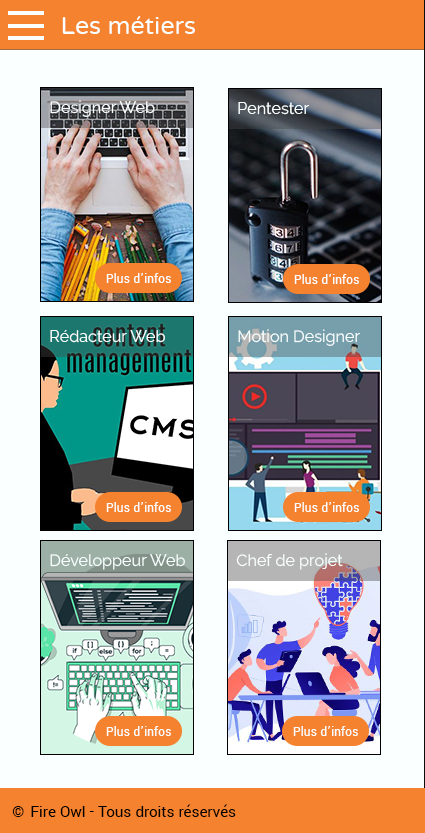
<style>
.page{position:relative;width:425px;height:833px;background:#faffff}
.page>*{position:absolute;margin:0}
.t1{font:25px "VarelaRound-Regular";color:#faffff}
.t2{font:16.2px "Raleway-Regular";color:#faffff}
.t3{font:13.5px "Yantramanav-Regular";color:#faffff}
.t4{font:16.7px "Yantramanav-Regular";color:#000000}
</style>
<div class="page">
<p class="t1" style="left:62px;top:16px;width:133px;height:18px">Les métiers</p>
<p class="t2" style="left:50px;top:100px;width:105px;height:17px">Designer Web</p>
<p class="t2" style="left:238px;top:102px;width:71px;height:13px">Pentester</p>
<p class="t3" style="left:106px;top:273px;width:65px;height:10px">Plus d’infos</p>
<p class="t3" style="left:294px;top:274px;width:65px;height:10px">Plus d’infos</p>
<p class="t2" style="left:238px;top:329px;width:122px;height:17px">Motion Designer</p>
<p class="t2" style="left:50px;top:330px;width:115px;height:13px">Rédacteur Web</p>
<p class="t3" style="left:106px;top:502px;width:65px;height:10px">Plus d’infos</p>
<p class="t3" style="left:294px;top:502px;width:65px;height:10px">Plus d’infos</p>
<p class="t2" style="left:50px;top:554px;width:135px;height:16px">Développeur Web</p>
<p class="t2" style="left:236px;top:553px;width:107px;height:17px">Chef de projet</p>
<p class="t3" style="left:106px;top:726px;width:65px;height:10px">Plus d’infos</p>
<p class="t3" style="left:293px;top:726px;width:65px;height:10px">Plus d’infos</p>
<p class="t4" style="left:12px;top:804px;width:224px;height:13px">© Fire Owl - Tous droits réservés</p>
</div>
